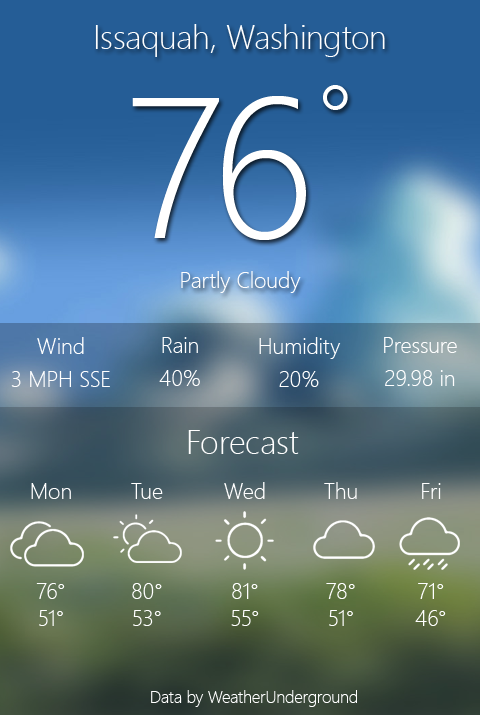
<style>
.page{position:relative;width:480px;height:715px}
.page>*{position:absolute;margin:0}
.t1{font:33.3px "SegoeUI-Light";color:#ffffff}
.t2{font:200px/188.9px "SegoeUI-Light";color:#ffffff}
.t3{font:100px/188.9px "SegoeUI-Light";color:#ffffff}
.t4{font:22.2px/50px "SegoeUI-Light";color:#ffffff}
.t5{font:22.2px/33.3px "SegoeUI-Light";color:#ffffff}
.t6{font:22.2px "SegoeUI-Light";color:#ffffff}
.t7{font:22.2px/100px "SegoeUI-Light";color:#ffffff}
.t8{font:16.7px "SegoeUI-Light";color:#ffffff}
</style>
<div class="page">
<p class="t1" style="left:95px;top:24px;width:290px;height:269px;text-align:center">Issaquah, Washington<br><span class="t2">76</span><span class="t3">°<br></span><span class="t4">Partly Cloudy</span></p>
<p class="t5" style="left:11px;top:337px;width:99px;height:50px;text-align:center"><span class="t6">Wind<br></span>3 MPH <span class="t6">SSE</span></p>
<p class="t6" style="left:159px;top:337px;width:41px;height:49px;text-align:center">Rain<br><span class="t5">40%</span></p>
<p class="t6" style="left:259px;top:337px;width:82px;height:50px;text-align:center">Humidity<br><span class="t5">20%</span></p>
<p class="t6" style="left:384px;top:337px;width:73px;height:49px;text-align:center">Pressure<br><span class="t5">29.98 in</span></p>
<p class="t1" style="left:188px;top:430px;width:111px;height:24px">Forecast</p>
<p class="t6" style="left:31px;top:483px;width:40px;height:143px;text-align:center">Mon<br><span class="t7">76°<br></span>51°</p>
<p class="t6" style="left:131px;top:483px;width:32px;height:143px;text-align:center">Tue<br><span class="t7">80°<br></span>53°</p>
<p class="t6" style="left:224px;top:482px;width:41px;height:144px;text-align:center">Wed<br><span class="t7">81°<br></span>55°</p>
<p class="t6" style="left:324px;top:482px;width:33px;height:144px;text-align:center">Thu<br><span class="t7">78°<br></span>51°</p>
<p class="t6" style="left:415px;top:483px;width:31px;height:143px;text-align:center">Fri<br><span class="t7">71°<br></span>46°</p>
<p class="t8" style="left:151px;top:690px;width:206px;height:17px">Data by WeatherUnderground</p>
</div>
